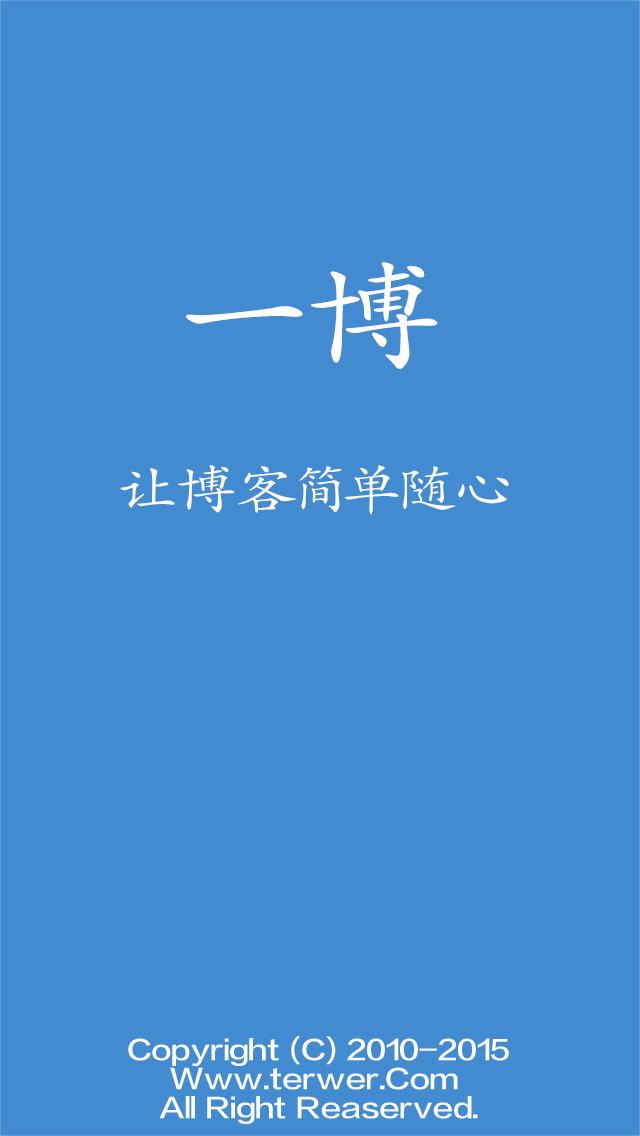
<style>
.page{position:relative;width:640px;height:1136px;background:#428bd1}
.page>*{position:absolute;margin:0}
.t1{font:119.9px "STKaiti";letter-spacing:0.06em;color:#ffffff;scale:1.17 1}
.t2{font:53.3px "STKaiti";letter-spacing:0.06em;color:#ffffff;scale:1.17 1}
.t3{font:26.6px "FZLTZHK--GBK1-0";letter-spacing:0.06em;color:#ffffff;scale:1.17 1}
</style>
<div class="page">
<p class="t1" style="left:186px;top:262px;width:252px;height:107px">一博</p>
<p class="t2" style="left:120px;top:465px;width:389px;height:50px">让博客简单随心</p>
<p class="t3" style="left:128px;top:1036px;width:381px;height:88px">Copyright (C) 2010-2015<br>    Www.terwer.Com <br>   All Right Reaserved.</p>
</div>
